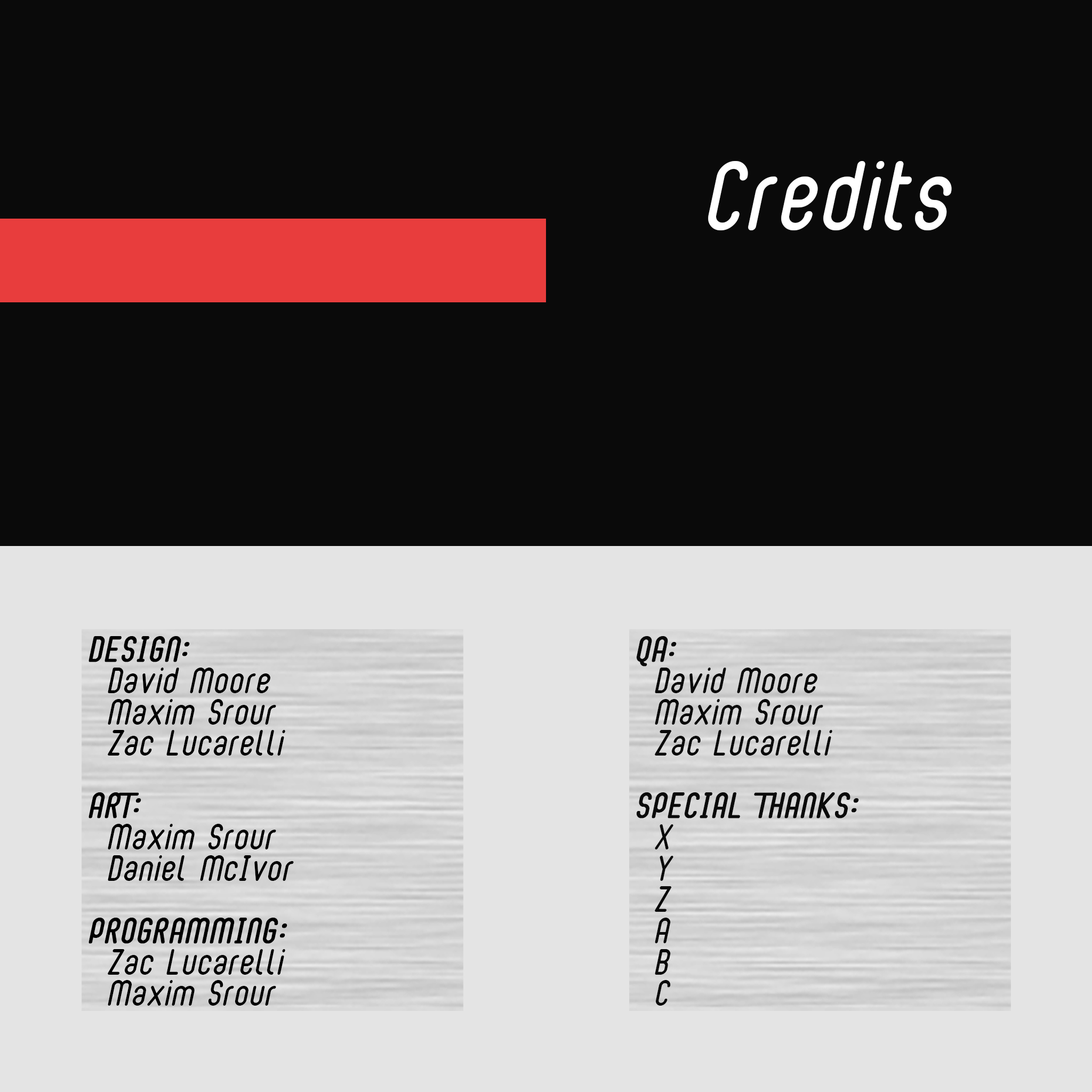
<style>
.page{position:relative;width:1092px;height:1092px;background:#0a0a0a}
.page>*{position:absolute;margin:0}
.t1{font:64px "BubbleBoy2";color:#ffffff}
.t2{font:23.5px/31.3px "BubbleBoy2";color:#000000}
.t3{font:23.5px/31.3px "BubbleBoy2";color:#000000;text-transform:uppercase;font-weight:bold}
.t4{font:23.5px/31.3px "BubbleBoy2";color:#0a0a0a}
.t5{font:23.5px/31.3px "BubbleBoy2";color:#0a0a0a;text-transform:uppercase;font-weight:bold}
</style>
<div class="page">
<p class="t1" style="left:708px;top:161px;width:244px;height:69px">Credits</p>
<p class="t2" style="left:89px;top:636px;width:205px;height:370px"><span class="t3">Design:<br></span>David Moore<br>Maxim Srour<br>Zac Lucarelli<br><br><span class="t3">Art:<br></span>Maxim Srour<br>Daniel McIvor<br><br><span class="t3">Programming:<br></span>Zac Lucarelli<br>Maxim Srour</p>
<p class="t4" style="left:636px;top:636px;width:223px;height:370px"><span class="t5">QA:<br></span>David Moore<br>Maxim Srour<br>Zac Lucarelli<br><br><span class="t5">Special Thanks:<br></span>X<br>Y<br>Z<br>A<br>B<br>C</p>
</div>
